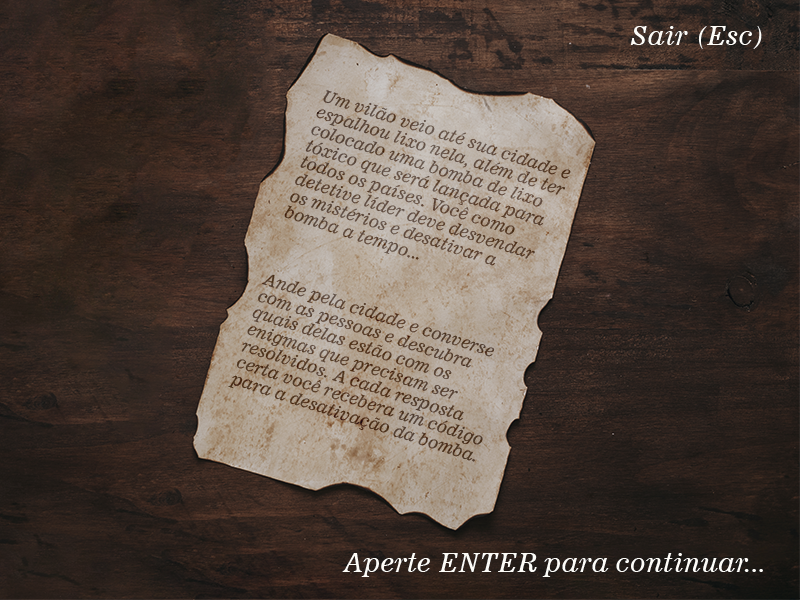
<style>
.page{position:relative;width:800px;height:600px}
.page>*{position:absolute;margin:0}
.t1{font:25.9px "News701BT-ItalicA";color:#ffffff}
.t2{font:16.7px/17.5px "News701BT-ItalicA";color:#554233}
</style>
<div class="page">
<p class="t1" style="left:630px;top:26px;width:132px;height:23px">Sair (Esc)</p>
<p class="t2" style="left:228px;top:90px;width:343px;height:372px;rotate:18deg">Um vilão veio até sua cidade e espalhou lixo nela, além de ter colocado uma bomba de lixo tóxico que será lançada para todos os países. Você como detetive líder deve desvendar os mistérios e desativar a bomba a tempo...<br><br><br><br>Ande pela cidade e converse com as pessoas e descubra quais delas estão com os enigmas que precisam ser resolvidos. A cada resposta certa você recebera um código para a desativação da bomba.</p>
<p class="t2" style="left:228px;top:90px;width:343px;height:372px;rotate:18deg">Um vilão veio até sua cidade e espalhou lixo nela, além de ter colocado uma bomba de lixo tóxico que será lançada para todos os países. Você como detetive líder deve desvendar os mistérios e desativar a bomba a tempo...<br><br><br><br>Ande pela cidade e converse com as pessoas e descubra quais delas estão com os enigmas que precisam ser resolvidos. A cada resposta certa você recebera um código para a desativação da bomba.</p>
<p class="t1" style="left:342px;top:553px;width:421px;height:24px">Aperte ENTER para continuar...</p>
</div>
